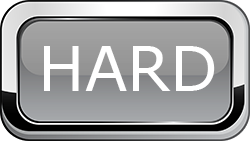
<style>
.page{position:relative;width:250px;height:141px}
.page>*{position:absolute;margin:0}
.t1{font:62px "Verdana";color:#ffffff}
</style>
<div class="page">
<p class="t1" style="left:44px;top:46px;width:171px;height:45px">HARDD</p>
</div>
